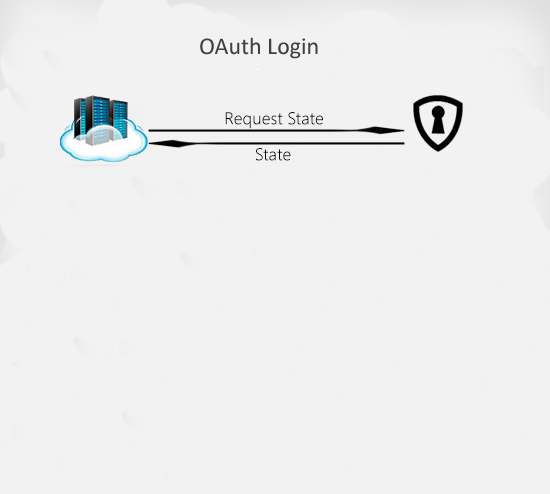
<style>
.page{position:relative;width:550px;height:494px;background:#f2f2f2}
.page>*{position:absolute;margin:0}
.t1{font:17.1px "SegoeUI-Semilight";color:#000000}
</style>
<div class="page">
<p class="t1" style="left:225px;top:112px;width:98px;height:17px">Request State</p>
<p class="t1" style="left:256px;top:148px;width:35px;height:13px">State</p>
</div>
